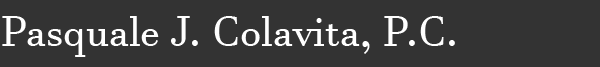
<style>
.page{position:relative;width:600px;height:67px;background:#333333}
.page>*{position:absolute;margin:0}
.t1{font:41.9px "JavaneseText";color:#ffffff}
</style>
<div class="page">
<p class="t1" style="left:2px;top:16px;width:453px;height:41px">Pasquale J. Colavita, P.C.</p>
</div>
